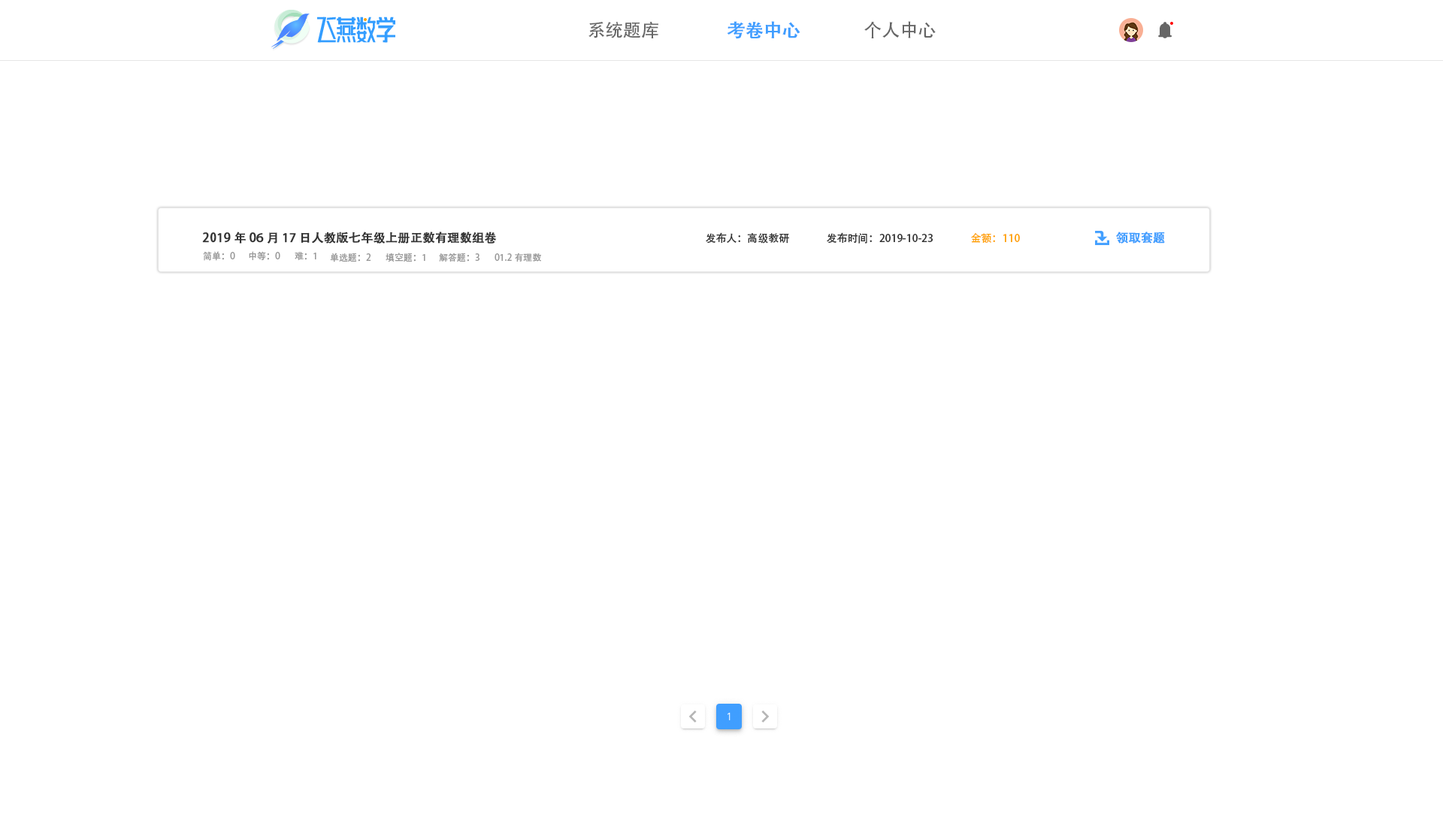
<style>
.page{position:relative;width:1443px;height:827px;background:#ffffff}
.page>*{position:absolute;margin:0}
.t1{font:18px "AdobeHeitiStd-Regular";color:#666666}
.t2{font:18px "AdobeHeitiStd-Regular";color:#409eff;font-weight:bold}
.t3{font:12px "AdobeHeitiStd-Regular";color:#333333;font-weight:bold}
.t4{font:10.5px "AdobeHeitiStd-Regular";color:#333333}
.t5{font:10.5px "AdobeHeitiStd-Regular";color:#ffa200}
.t6{font:12px "AdobeHeitiStd-Regular";color:#409eff;font-weight:bold}
.t7{font:9px "AdobeHeitiStd-Regular";color:#999999}
</style>
<div class="page">
<p class="t1" style="left:588px;top:22px;width:70px;height:16px">系统题库</p>
<p class="t2" style="left:727px;top:21px;width:73px;height:18px">考卷中心</p>
<p class="t1" style="left:864px;top:21px;width:71px;height:17px">个人中心</p>
<p class="t3" style="left:202px;top:231px;width:295px;height:12px">2019年06月17日人教版七年级上册正数有理数组卷</p>
<p class="t4" style="left:706px;top:232px;width:83px;height:11px">发布人：高级教研</p>
<p class="t4" style="left:827px;top:232px;width:105px;height:11px">发布时间：2019-10-23</p>
<p class="t5" style="left:971px;top:233px;width:49px;height:10px">金额：110</p>
<p class="t6" style="left:1116px;top:231px;width:49px;height:12px">领取套题</p>
<p class="t7" style="left:203px;top:251px;width:32px;height:10px">简单：0</p>
<p class="t7" style="left:249px;top:251px;width:31px;height:9px">中等：0</p>
<p class="t7" style="left:295px;top:252px;width:21px;height:8px">难：1</p>
<p class="t7" style="left:330px;top:252px;width:41px;height:10px">单选题：2</p>
<p class="t7" style="left:385px;top:252px;width:40px;height:10px">填空题：1</p>
<p class="t7" style="left:439px;top:252px;width:40px;height:10px">解答题：3</p>
<p class="t7" style="left:494px;top:252px;width:47px;height:9px">01.2有理数</p>
</div>
